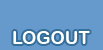
<style>
.page{position:relative;width:103px;height:50px;background:#6699cc}
.page>*{position:absolute;margin:0}
.t1{font:18px "ArialRoundedMTBold";color:#ffffff}
</style>
<div class="page">
<p class="t1" style="left:13px;top:31px;width:77px;height:13px">LOGOUT</p>
</div>
